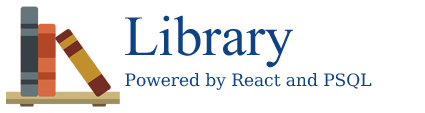
<style>
.page{position:relative;width:425px;height:113px;background:#ffffff}
.page>*{position:absolute;margin:0}
.t1{font:56.5px "MongolianBaiti";color:#0e4284}
.t2{font:17px "DejaVuMathTeXGyre-Regular";color:#0e4284}
</style>
<div class="page">
<p class="t1" style="left:125px;top:15px;width:168px;height:53px">Library</p>
<p class="t2" style="left:125px;top:73px;width:247px;height:17px">Powered by React and PSQL</p>
</div>
